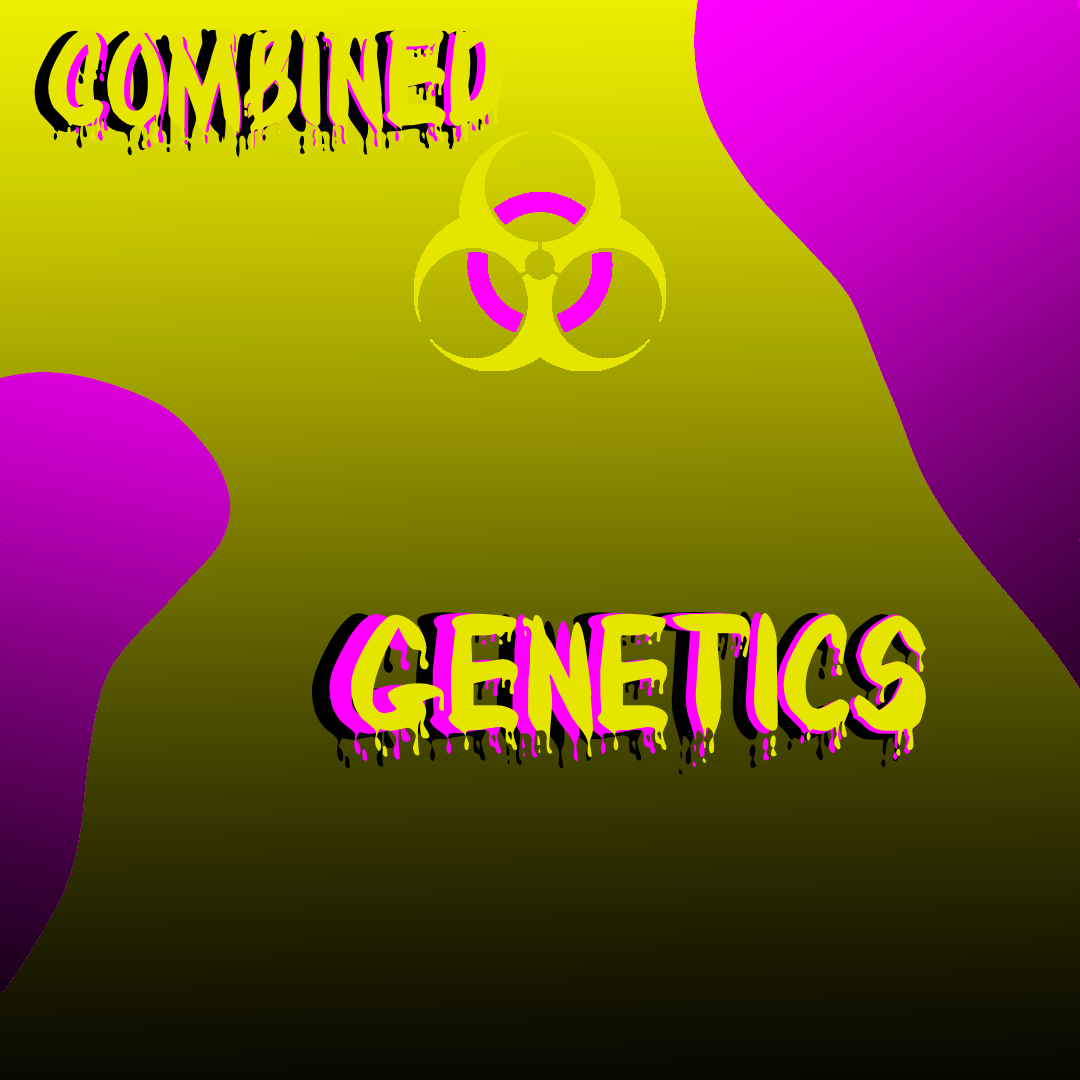
<style>
.page{position:relative;width:1080px;height:1080px}
.page>*{position:absolute;margin:0}
.t1{font:130px "Bloody";scale:0.96 1}
.t2{font:125px "Bloody";color:#e5e500}
.t3{font:120px "Bloody";color:#e5e500}
.t4{font:155px "Bloody"}
.t5{font:150px "Bloody";color:#e5e500}
</style>
<div class="page">
<p class="t1" style="left:34px;top:29px;width:454px;height:129px">combined</p>
<p class="t2" style="left:48px;top:26px;width:455px;height:125px">combined</p>
<p class="t3" style="left:57px;top:30px;width:437px;height:120px">combined</p>
<p class="t4" style="left:329px;top:612px;width:595px;height:155px">genetics</p>
<p class="t5" style="left:350px;top:613px;width:576px;height:150px">genetics</p>
</div>
